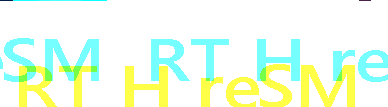
<style>
.page{position:relative;width:388px;height:107px;background:#ffffff}
.page>*{position:absolute;margin:0}
.t1{font:60px "SegoeUI-Semibold";scale:1.2 1}
.t2{font:60px "SegoeUI-Semibold";scale:1.27 1}
</style>
<div class="page">
<p class="t1" style="left:0px;top:38px;width:387px;height:44px">SM  RT <span class="t2">H r</span>e</p>
</div>
